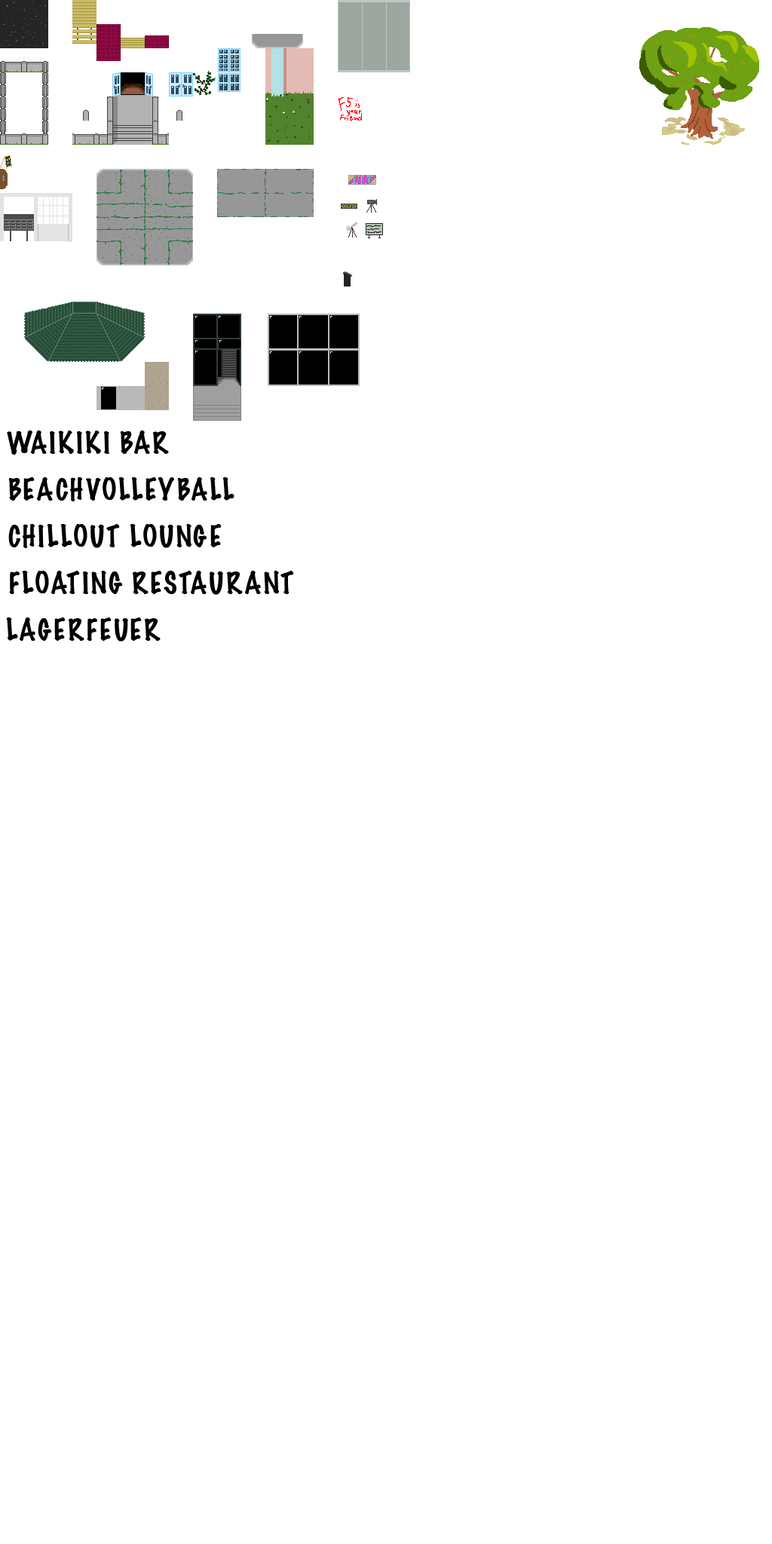
<style>
.page{position:relative;width:772px;height:1544px;background:#ffffff}
.page>*{position:absolute;margin:0}
.t1{font:27.2px "MarkerFelt-Thin";letter-spacing:0.06em;color:#000000}
</style>
<div class="page">
<p class="t1" style="left:7px;top:431px;width:162px;height:24px">WAIKIKI BAR</p>
<p class="t1" style="left:8px;top:477px;width:227px;height:24px">BEACHVOLLEYBALL</p>
<p class="t1" style="left:8px;top:524px;width:214px;height:24px">CHILLOUT LOUNGE</p>
<p class="t1" style="left:9px;top:571px;width:285px;height:24px">FLOATING RESTAURANT</p>
<p class="t1" style="left:6px;top:618px;width:155px;height:24px">LAGERFEUER</p>
</div>
